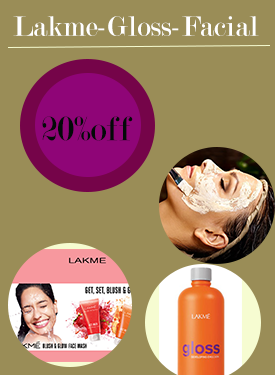
<style>
.page{position:relative;width:275px;height:375px;background:#9a8d57}
.page>*{position:absolute;margin:0}
.t1{font:30px "Modern-Regular";color:#ffffff}
.t2{font:36.2px "Modern-Regular";color:#020a08}
</style>
<div class="page">
<p class="t1" style="left:13px;top:16px;width:246px;height:20px">Lakme-Gloss-Facial</p>
<p class="t2" style="left:42px;top:116px;width:91px;height:25px">20%off</p>
</div>
